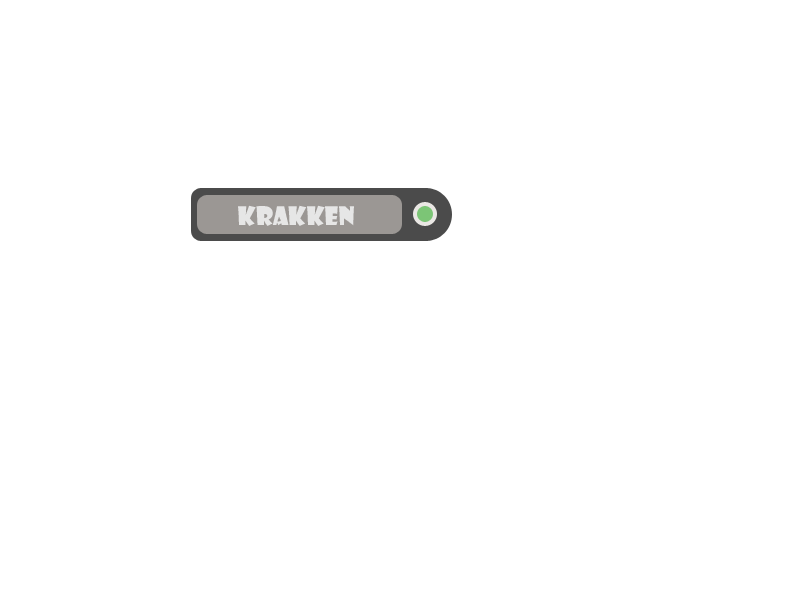
<style>
.page{position:relative;width:800px;height:600px;background:#ffffff}
.page>*{position:absolute;margin:0}
.t1{font:24.9px "ShowcardGothic-Reg";color:#e6e6e6}
</style>
<div class="page">
<p class="t1" style="left:238px;top:205px;width:116px;height:21px">Krakken</p>
</div>
